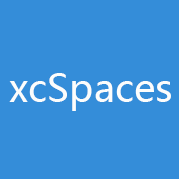
<style>
.page{position:relative;width:179px;height:179px;background:#348dd9}
.page>*{position:absolute;margin:0}
.t1{font:38px "MicrosoftYaHeiUI";color:#fcfdfc}
</style>
<div class="page">
<p class="t1" style="left:9px;top:73px;width:162px;height:38px">xcSpaces</p>
</div>
